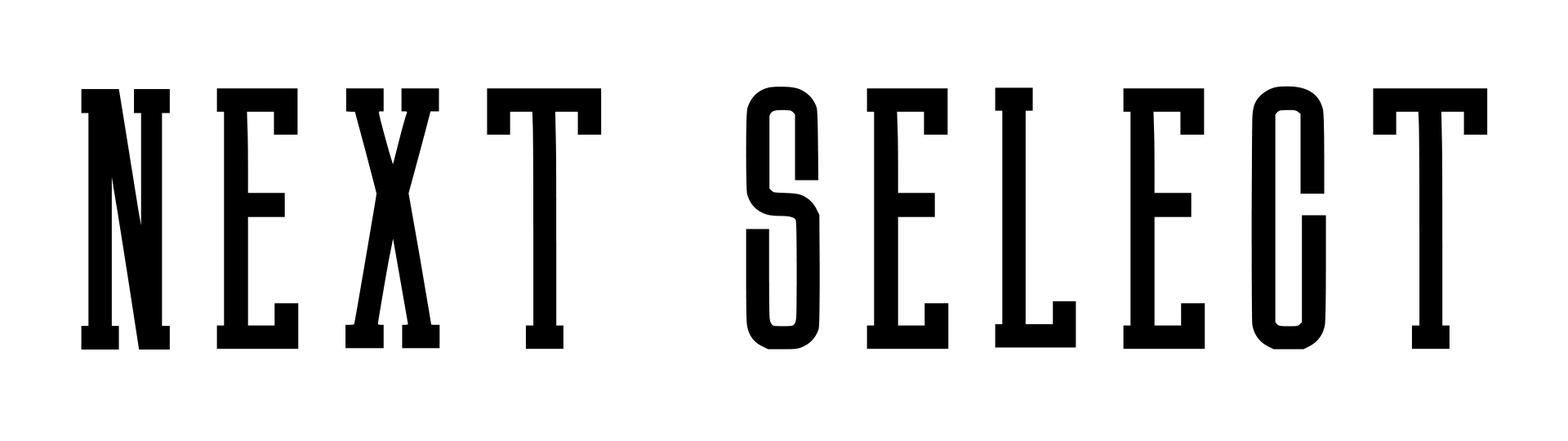
<style>
.page{position:relative;width:1568px;height:441px;background:#ffffff}
.page>*{position:absolute;margin:0}
.t1{font:336.9px "DyoblogFont-Regular";letter-spacing:0.04em;color:#000000}
</style>
<div class="page">
<p class="t1" style="left:81px;top:86px;width:1407px;height:264px">NEXT SELECT</p>
</div>
